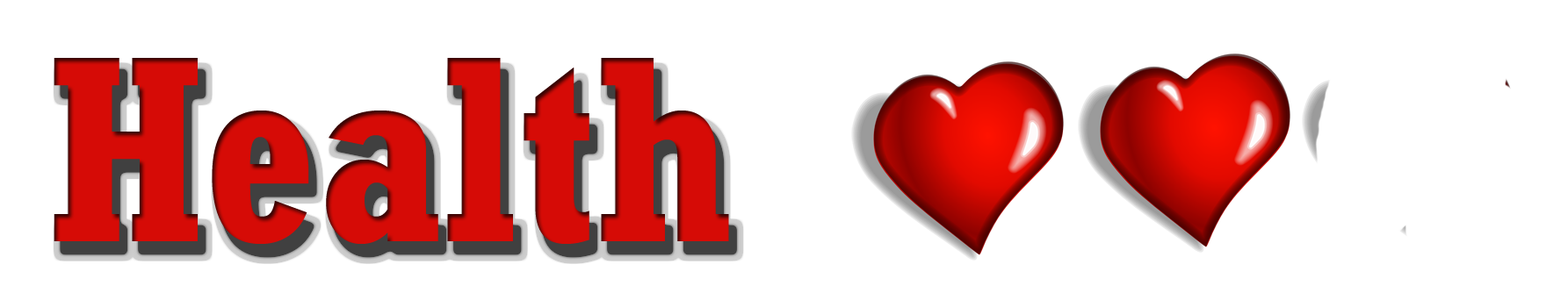
<style>
.page{position:relative;width:1568px;height:300px;background:#ffffff}
.page>*{position:absolute;margin:0}
.t1{font:262.1px "Rockwell-CondensedBold";color:#d60b06}
</style>
<div class="page">
<p class="t1" style="left:54px;top:58px;width:675px;height:186px">Health</p>
</div>
